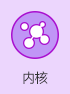
<style>
.page{position:relative;width:70px;height:94px;background:#ecd6fd}
.page>*{position:absolute;margin:0}
.t1{font:13px "MicrosoftYaHei";color:#323232}
</style>
<div class="page">
<p class="t1" style="left:23px;top:71px;width:25px;height:13px">内核</p>
</div>
